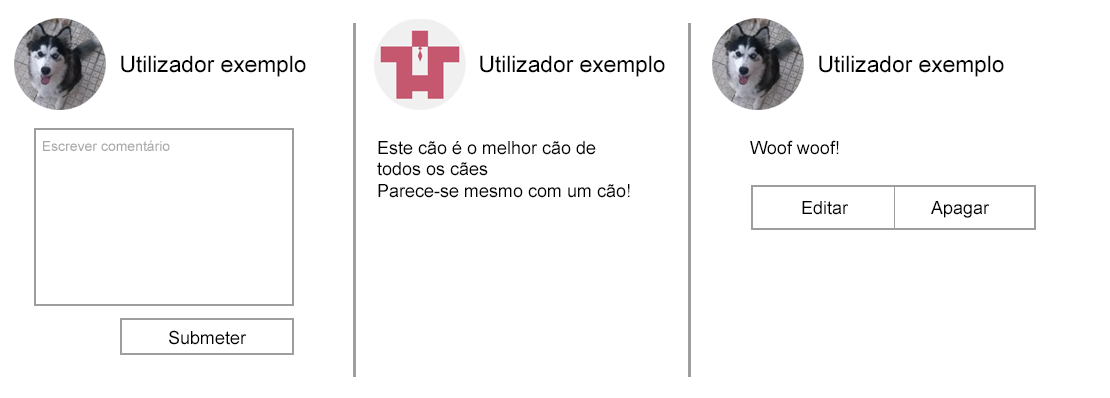
<style>
.page{position:relative;width:1110px;height:398px;background:#ffffff}
.page>*{position:absolute;margin:0}
.t1{font:22.7px "ArialMT";color:#000000}
.t2{font:14px "ArialMT";color:#a8a8a8}
.t3{font:18px "ArialMT";color:#000000}
</style>
<div class="page">
<p class="t1" style="left:121px;top:55px;width:185px;height:22px">Utilizador exemplo</p>
<p class="t1" style="left:480px;top:55px;width:185px;height:22px">Utilizador exemplo</p>
<p class="t1" style="left:819px;top:55px;width:185px;height:22px">Utilizador exemplo</p>
<p class="t2" style="left:43px;top:140px;width:127px;height:11px">Escrever comentário</p>
<p class="t3" style="left:377px;top:141px;width:253px;height:57px">Este cão é o melhor cão de todos os cães<br>Parece-se mesmo com um cão!</p>
<p class="t3" style="left:750px;top:140px;width:89px;height:15px">Woof woof!</p>
<p class="t3" style="left:802px;top:201px;width:47px;height:14px">Editar</p>
<p class="t3" style="left:931px;top:201px;width:59px;height:17px">Apagar</p>
<p class="t3" style="left:169px;top:330px;width:78px;height:15px">Submeter</p>
</div>
